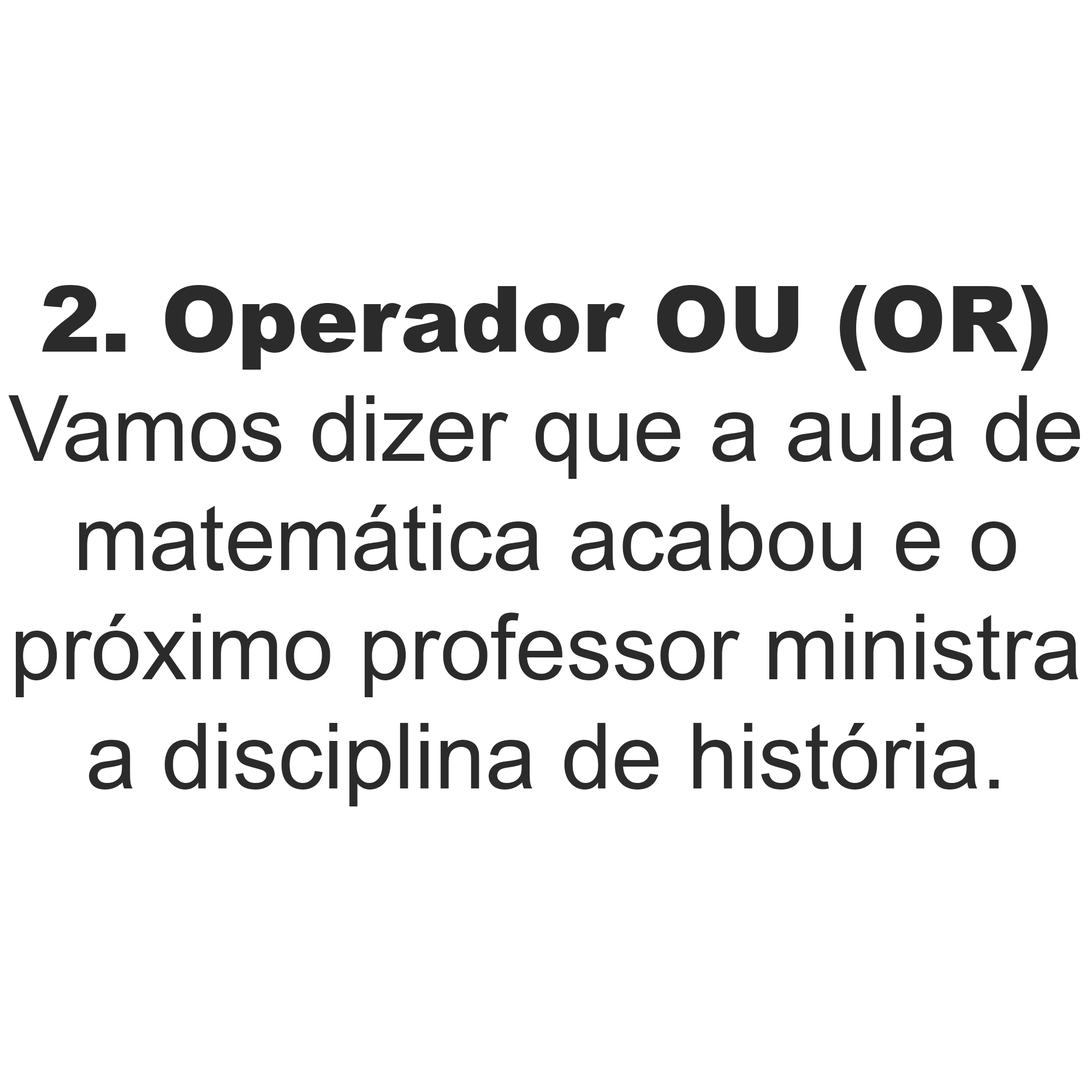
<style>
.page{position:relative;width:1092px;height:1092px;background:#ffffff}
.page>*{position:absolute;margin:0}
.t1{font:91px "ArialMT";color:#2b2b2b}
.t2{font:91px "Arial-Black";color:#2b2b2b}
</style>
<div class="page">
<p class="t1" style="left:8px;top:285px;width:1072px;height:521px;text-align:center"><span class="t2">2. Operador OU (OR)<br></span>Vamos dizer que a aula de<br>matemática acabou e o<br>próximo professor ministra<br>a disciplina de história.</p>
</div>
